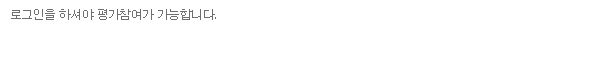
<style>
.page{position:relative;width:594px;height:66px;background:#ffffff}
.page>*{position:absolute;margin:0}
.t1{font:12px "Dotum";letter-spacing:-0.05em;color:#6f6f6f}
</style>
<div class="page">
<p class="t1" style="left:11px;top:9px;width:205px;height:11px">로그인을 하셔야 평가참여가 가능합니다.</p>
</div>
